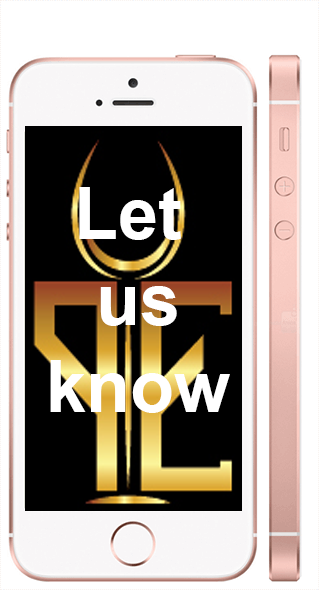
<style>
.page{position:relative;width:319px;height:590px;background:#ffffff}
.page>*{position:absolute;margin:0}
.t1{font:72px "Arial-BoldMT";color:#ffffff}
</style>
<div class="page">
<p class="t1" style="left:50px;top:187px;width:180px;height:226px;text-align:center">Let <br>us<br>know</p>
</div>
